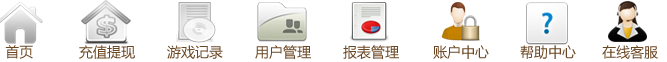
<style>
.page{position:relative;width:667px;height:62px;background:#ffffff}
.page>*{position:absolute;margin:0}
.t1{font:14px "MicrosoftYaHei";color:#6b4724}
</style>
<div class="page">
<p class="t1" style="left:5px;top:45px;width:28px;height:14px">首页</p>
<p class="t1" style="left:79px;top:45px;width:56px;height:14px">充值提现</p>
<p class="t1" style="left:167px;top:45px;width:56px;height:14px">游戏记录</p>
<p class="t1" style="left:255px;top:45px;width:56px;height:14px">用户管理</p>
<p class="t1" style="left:343px;top:45px;width:56px;height:14px">报表管理</p>
<p class="t1" style="left:433px;top:45px;width:56px;height:14px">账户中心</p>
<p class="t1" style="left:520px;top:45px;width:56px;height:14px">帮助中心</p>
<p class="t1" style="left:602px;top:45px;width:56px;height:14px">在线客服</p>
</div>
